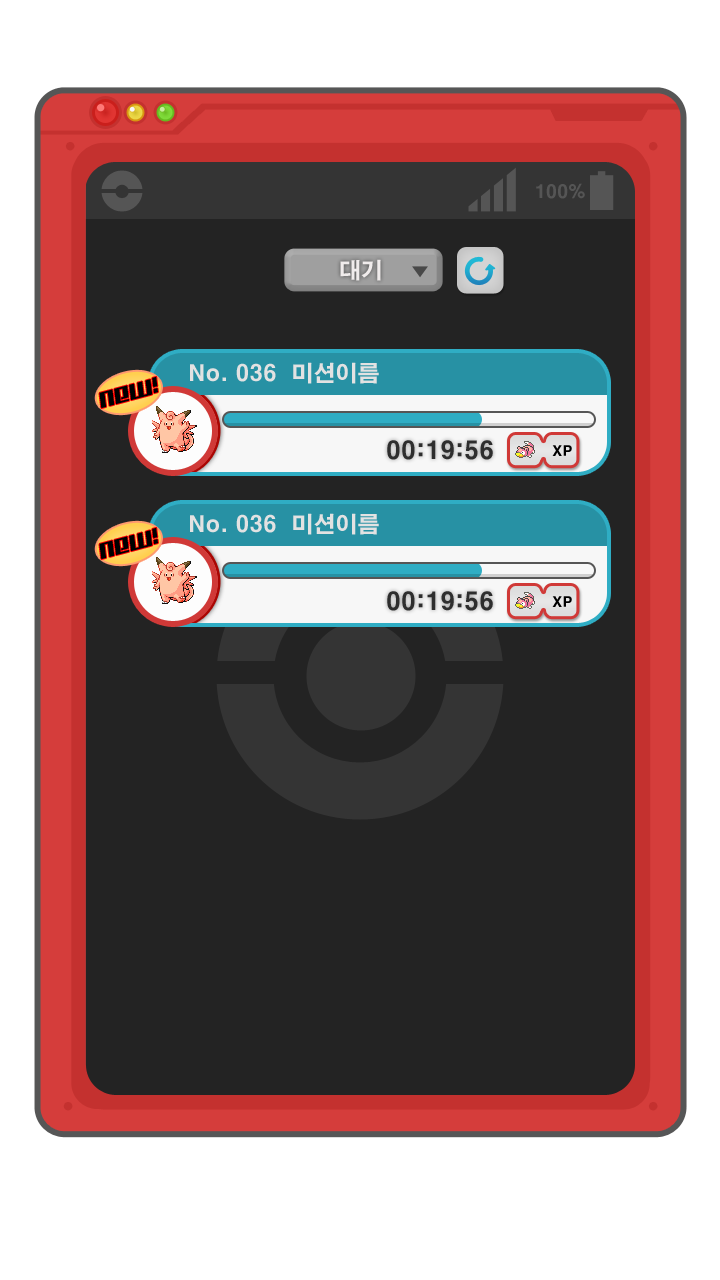
<style>
.page{position:relative;width:720px;height:1280px;background:#232323}
.page>*{position:absolute;margin:0}
.t1{font:18px "H2gtrE";color:#555555}
.t2{font:22px "H2gtrE";color:#f0ecec}
.t3{font:22px "H2gtrE";color:#e2e2e2}
.t4{font:22px "Kitchenpolice";color:#000000}
.t5{font:24px "H2gtrE";color:#2e2e2e}
.t6{font:14px "H2gtrE";color:#000000}
</style>
<div class="page">
<p class="t1" style="left:536px;top:183px;width:49px;height:16px">100%</p>
<p class="t2" style="left:340px;top:259px;width:41px;height:22px">대기</p>
<p class="t3" style="left:190px;top:362px;width:189px;height:22px">No. 036  미션이름</p>
<p class="t4" style="left:99px;top:376px;width:59px;height:33px;rotate:-15deg">NEW!</p>
<p class="t5" style="left:387px;top:440px;width:106px;height:20px">00:19:56</p>
<p class="t6" style="left:552px;top:445px;width:20px;height:11px">XP</p>
</div>
